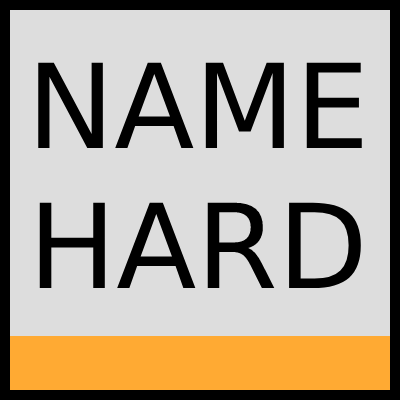
<style>
.page{position:relative;width:400px;height:400px;background:#dddddd}
.page>*{position:absolute;margin:0}
.t1{font:117px "DejaVuSans";color:#000000}
</style>
<div class="page">
<p class="t1" style="left:38px;top:62px;width:324px;height:226px;text-align:center">NAME<br>HARD</p>
</div>
